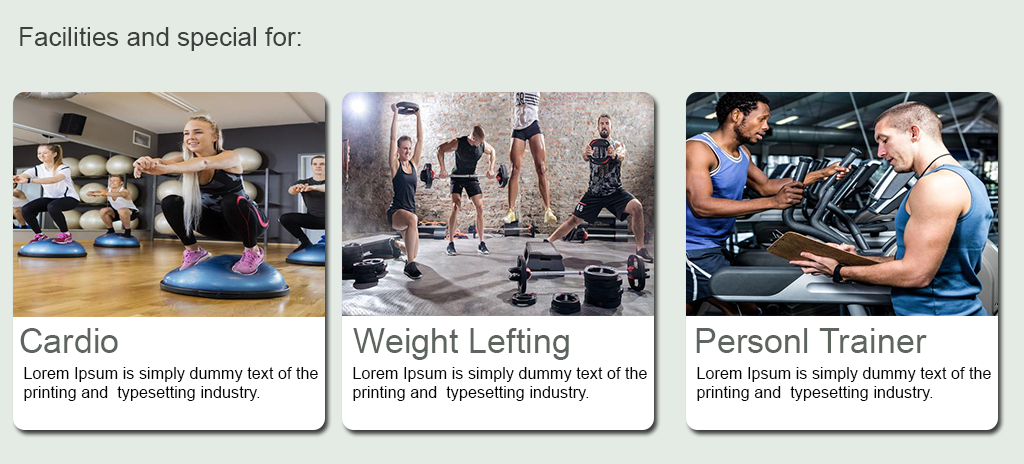
<style>
.page{position:relative;width:1024px;height:464px;background:#e4eae4}
.page>*{position:absolute;margin:0}
.t1{font:26px "ArialMT";color:#3d403e}
.t2{font:34.2px "ArialMT";color:#5e655f}
.t3{font:16.2px "ArialMT";color:#050505}
</style>
<div class="page">
<p class="t1" style="left:20px;top:27px;width:281px;height:24px">Facilities and special for:</p>
<p class="t2" style="left:20px;top:328px;width:98px;height:25px">Cardio</p>
<p class="t2" style="left:353px;top:328px;width:216px;height:32px">Weight Lefting</p>
<p class="t2" style="left:696px;top:328px;width:231px;height:25px">Personl Trainer</p>
<p class="t3" style="left:24px;top:367px;width:294px;height:34px">Lorem Ipsum is simply dummy text of the <br>printing and  typesetting industry.</p>
<p class="t3" style="left:353px;top:367px;width:294px;height:34px">Lorem Ipsum is simply dummy text of the <br>printing and  typesetting industry.</p>
<p class="t3" style="left:697px;top:367px;width:294px;height:34px">Lorem Ipsum is simply dummy text of the <br>printing and  typesetting industry.</p>
</div>
